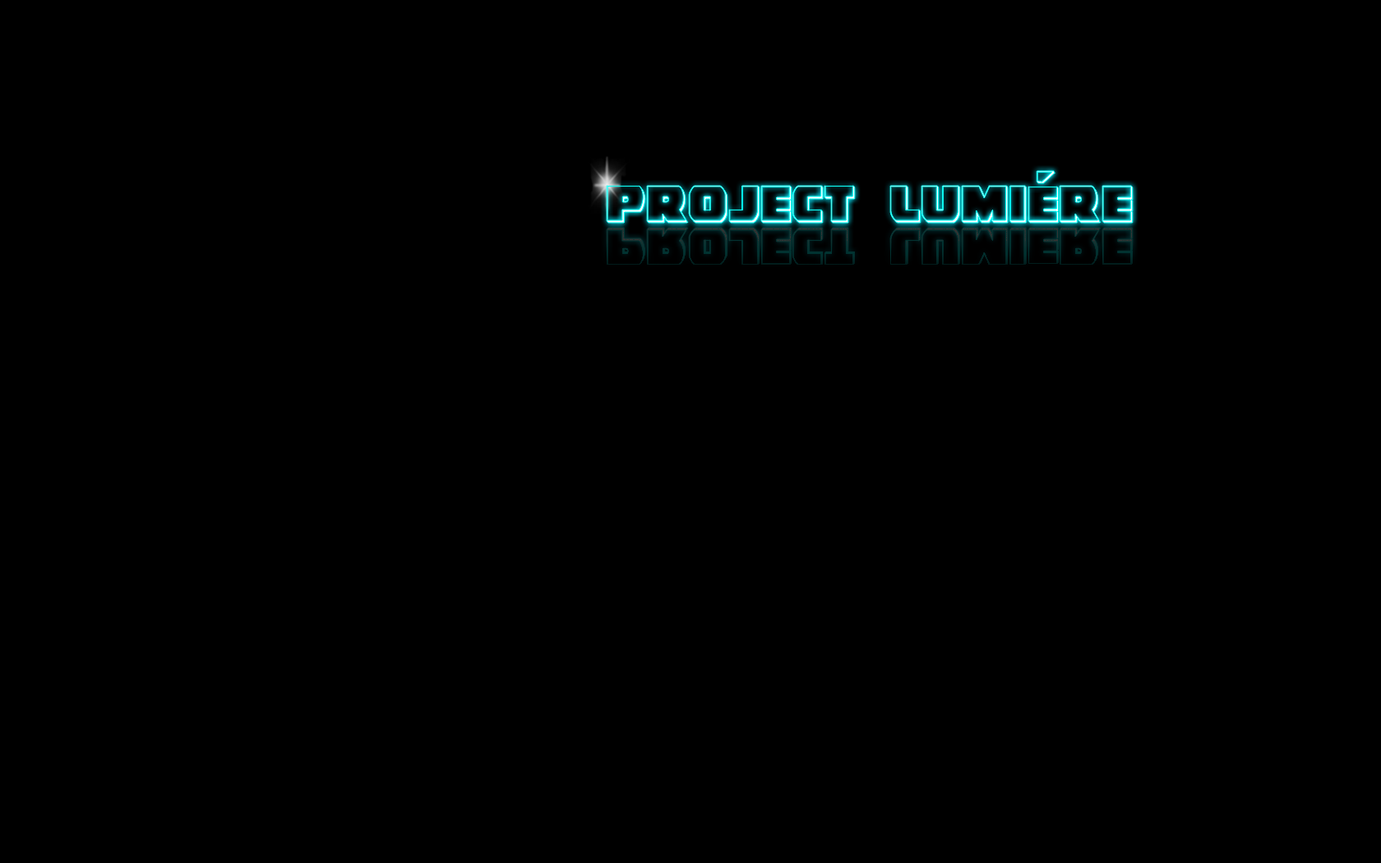
<style>
.page{position:relative;width:1381px;height:863px;background:#000000}
.page>*{position:absolute;margin:0}
.t1{font:55.3px "GuardianShadow";letter-spacing:0.005em;scale:0.79 1}
</style>
<div class="page">
<p class="t1" style="left:607px;top:171px;width:526px;height:52px">Project  Lumiére</p>
<p class="t1" style="left:607px;top:228px;width:526px;height:52px">Project  Lumiére</p>
</div>
